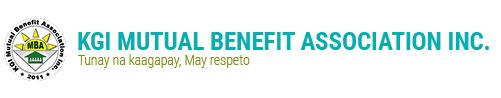
<style>
.page{position:relative;width:501px;height:98px;background:#ffffff}
.page>*{position:absolute;margin:0}
.t1{font:25px "RobotoCondensed-Bold";color:#08adb1}
.t2{font:13.8px "RobotoCondensed-Light";color:#7e8b14}
</style>
<div class="page">
<p class="t1" style="left:78px;top:32px;width:411px;height:18px">KGI MUTUAL BENEFIT ASSOCIATION INC.</p>
<p class="t2" style="left:78px;top:54px;width:172px;height:14px">Tunay na kaagapay, May respeto</p>
</div>
